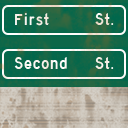
<style>
.page{position:relative;width:128px;height:128px}
.page>*{position:absolute;margin:0}
.t1{font:15px "traffic03";letter-spacing:0.05em;color:#f6ede4}
.t2{font:15px "traffic03";letter-spacing:0.05em}
.t3{font:15px "traffic03";letter-spacing:0.05em;color:#ffffff}
</style>
<div class="page">
<p class="t1" style="left:15px;top:13px;width:34px;height:13px">First</p>
<p class="t2" style="left:95px;top:13px;width:19px;height:12px">St.</p>
<p class="t3" style="left:14px;top:57px;width:53px;height:12px">Second</p>
<p class="t1" style="left:95px;top:57px;width:19px;height:12px">St.</p>
</div>
